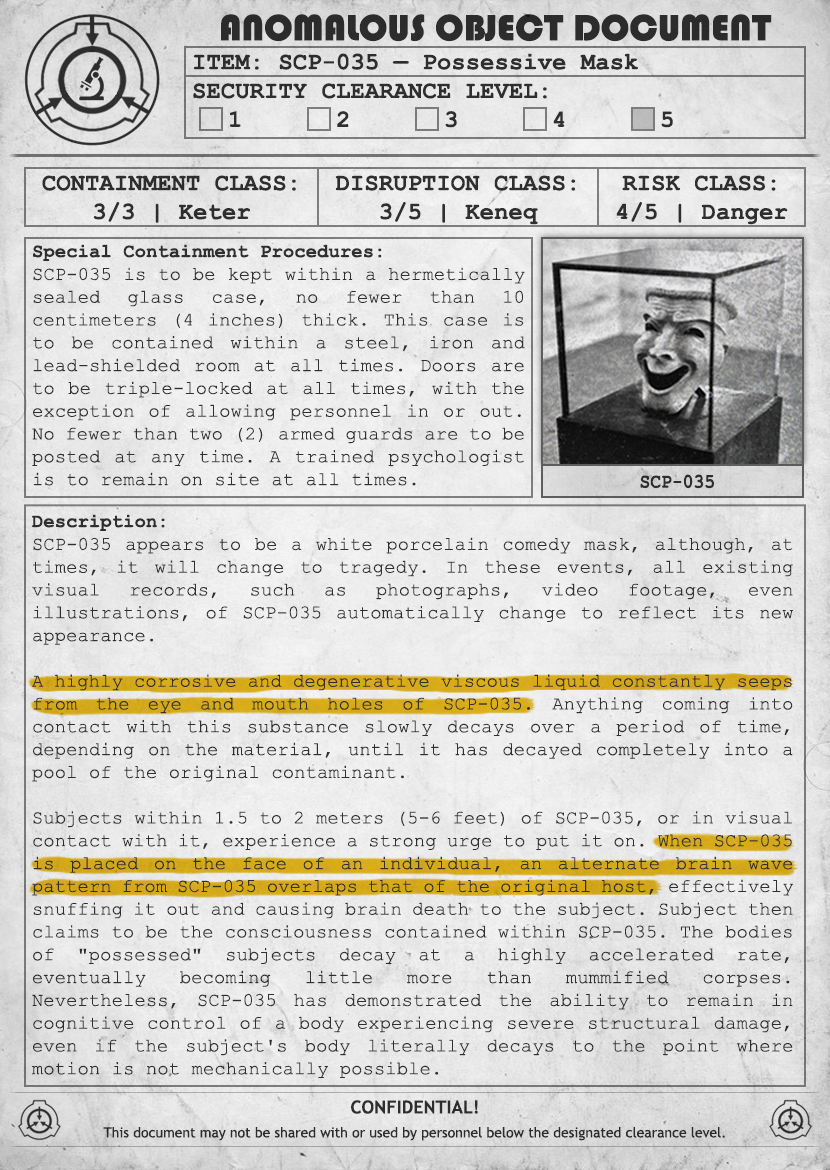
<style>
.page{position:relative;width:830px;height:1170px}
.page>*{position:absolute;margin:0}
.t1{font:38px "Bauhaus93";color:#333333;text-transform:uppercase}
.t2{font:24px "CourierNewPS-BoldMT";color:#333333}
.t3{font:24px "CourierNewPS-BoldMT";color:#333333;text-transform:uppercase}
.t4{font:19px "CourierNewPSMT";color:#333333}
.t5{font:19px "CourierNewPS-BoldMT";color:#333333}
.t6{font:20.1px "CourierNewPS-BoldMT";color:#333333;scale:0.9 1}
.t7{font:14px/24px "TrebuchetMS";color:#333333}
.t8{font:18px/24px "TrebuchetMS-Bold";color:#333333}
</style>
<div class="page">
<p class="t1" style="left:221px;top:14px;width:551px;height:28px">anomalous object document</p>
<p class="t2" style="left:193px;top:53px;width:480px;height:75px">ITEM: SCP-035 — Possessive Mask<br><span class="t3">Security CLEARANCE LEVEL:</span> <br> 1   2   3   4   5</p>
<p class="t2" style="left:42px;top:175px;width:254px;height:48px;text-align:center">CONTAINMENT CLASS:<br>3/3 | Keter</p>
<p class="t2" style="left:335px;top:175px;width:241px;height:50px;text-align:center">DISRUPTION CLASS:<br>3/5 | Keneq</p>
<p class="t2" style="left:616px;top:175px;width:172px;height:50px;text-align:center">RISK CLASS:<br>4/5 | Danger</p>
<p class="t4" style="left:32px;top:244px;width:493px;height:242px;text-align:justify"><span class="t5">Special Containment Procedures:<br></span>SCP-035 is to be kept within a hermetically sealed glass case, no fewer than 10 centimeters (4 inches) thick. This case is to be contained within a steel, iron and lead-shielded room at all times. Doors are to be triple-locked at all times, with the exception of allowing personnel in or out. No fewer than two (2) armed guards are to be posted at any time. A trained psychologist is to remain on site at all times.</p>
<p class="t6" style="left:640px;top:474px;width:74px;height:15px">SCP-035</p>
<p class="t4" style="left:32px;top:514px;width:762px;height:564px;text-align:justify"><span class="t5">Description:<br></span>SCP-035 appears to be a white porcelain comedy mask, although, at times, it will change to tragedy. In these events, all existing visual records, such as photographs, video footage, even illustrations, of SCP-035 automatically change to reflect its new appearance.<br><br>A highly corrosive and degenerative viscous liquid constantly seeps from the eye and mouth holes of SCP-035. Anything coming into contact with this substance slowly decays over a period of time, depending on the material, until it has decayed completely into a pool of the original contaminant.<br><br>Subjects within 1.5 to 2 meters (5-6 feet) of SCP-035, or in visual contact with it, experience a strong urge to put it on. When SCP-035 is placed on the face of an individual, an alternate brain wave pattern from SCP-035 overlaps that of the original host, effectively snuffing it out and causing brain death to the subject. Subject then claims to be the consciousness contained within SCP-035. The bodies of "possessed" subjects decay at a highly accelerated rate, eventually becoming little more than mummified corpses. Nevertheless, SCP-035 has demonstrated the ability to remain in cognitive control of a body experiencing severe structural damage, even if the subject's body literally decays to the point where motion is not mechanically possible.</p>
<p class="t7" style="left:103px;top:1100px;width:622px;height:41px;text-align:center"><span class="t8">CONFIDENTIAL!<br></span>This document may not be shared with or used by personnel below the designated clearance level.</p>
</div>
